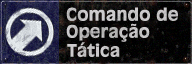
<style>
.page{position:relative;width:192px;height:64px}
.page>*{position:absolute;margin:0}
.t1{font:17px "Incised901BT-Bold";color:#c9cbcb;font-weight:bold}
.t2{font:16.7px "Incised901BT-Bold";color:#c4c4c3;font-weight:bold}
.t3{font:16.7px "Incised901BT-Bold";color:#c8c7c8;font-weight:bold}
</style>
<div class="page">
<p class="t1" style="left:66px;top:7px;width:112px;height:14px">Comando de</p>
<p class="t2" style="left:66px;top:23px;width:84px;height:19px">Operação</p>
<p class="t3" style="left:67px;top:42px;width:53px;height:15px">Tática</p>
</div>
